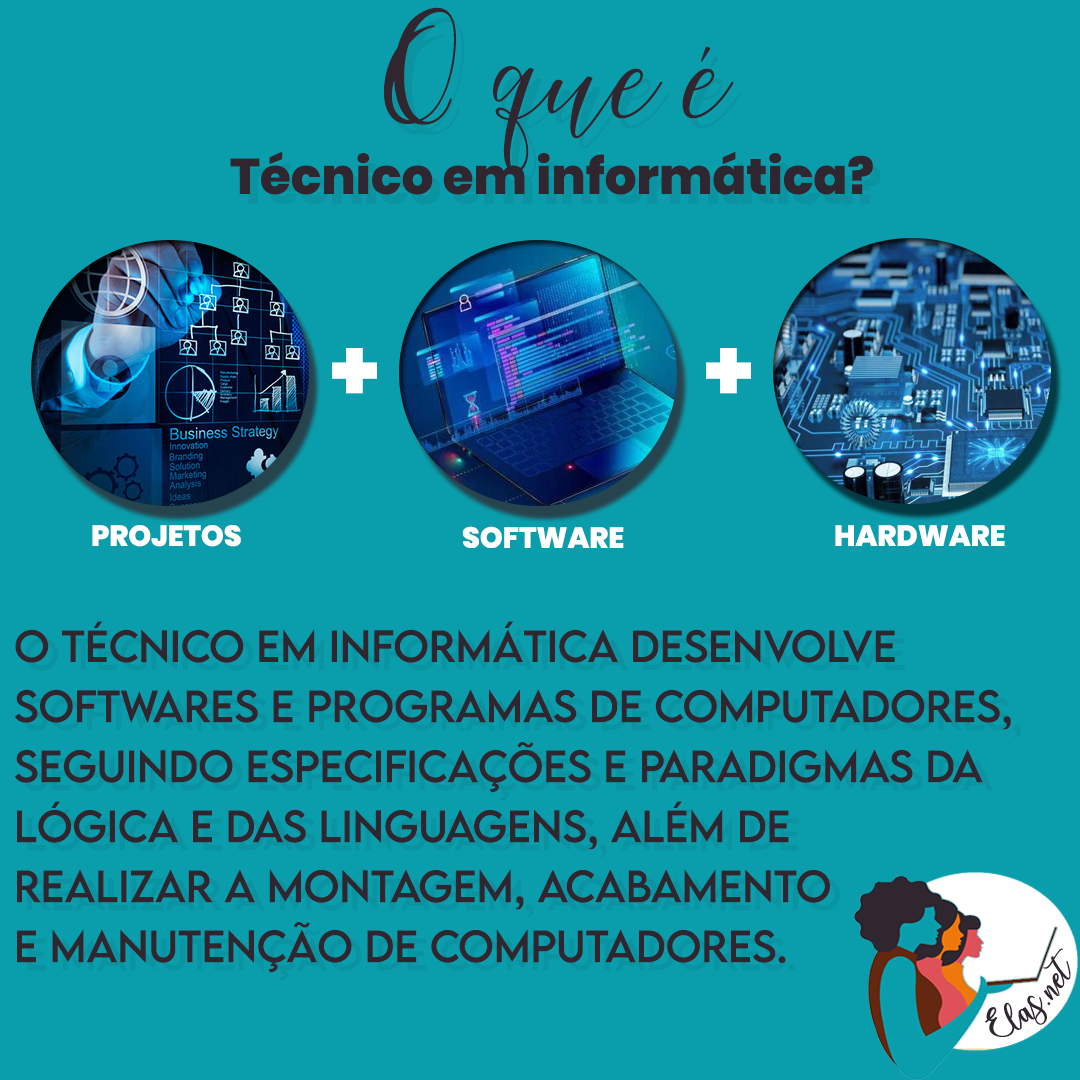
<style>
.page{position:relative;width:1080px;height:1080px;background:#0a9eac}
.page>*{position:absolute;margin:0}
.t1{font:50px "Poppins-ExtraBold";color:#2f262f}
.t2{font:172.1px "MaheisaScript";color:#2f262f}
.t3{font:88px "Poppins-ExtraBold";color:#ffffff}
.t4{font:29px "Poppins-ExtraBold";color:#ffffff}
.t5{font:40px/60px "LEMONMILK-Regular";color:#2f262f}
.t6{font:25px "charlinda-Regular";color:#2f262f;scale:1.18 1}
</style>
<div class="page">
<p class="t1" style="left:230px;top:7px;width:643px;height:188px;text-align:center"><span class="t2">O que é<br></span>Técnico em informática?</p>
<p class="t3" style="left:332px;top:348px;width:45px;height:46px">+</p>
<p class="t3" style="left:706px;top:348px;width:45px;height:46px">+</p>
<p class="t4" style="left:92px;top:525px;width:149px;height:22px">PROJETOS</p>
<p class="t4" style="left:462px;top:526px;width:162px;height:22px">SOFTWARE</p>
<p class="t4" style="left:835px;top:525px;width:170px;height:21px">HARDWARE</p>
<p class="t5" style="left:15px;top:621px;width:996px;height:352px">O técnico em Informática desenvolve <br>softwares e programas de computadores, <br>seguindo especificações e paradigmas da <br>lógica e das linguagens, além de <br>realizar a montagem, acabamento <br>e manutenção de computadores.</p>
<p class="t6" style="left:985px;top:948px;width:86px;height:89px;rotate:-43deg">Elas.net</p>
</div>
